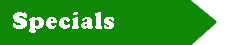
<style>
.page{position:relative;width:250px;height:45px;background:#128809}
.page>*{position:absolute;margin:0}
.t1{font:25.2px "CooperBlack";color:#ffffff}
</style>
<div class="page">
<p class="t1" style="left:13px;top:12px;width:101px;height:21px">Specials</p>
</div>
